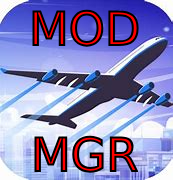
<style>
.page{position:relative;width:173px;height:180px}
.page>*{position:absolute;margin:0}
.t1{font:46px "DejaVuSans"}
</style>
<div class="page">
<p class="t1" style="left:32px;top:9px;width:107px;height:38px">MOD</p>
<p class="t1" style="left:34px;top:135px;width:104px;height:38px">MGR</p>
</div>
